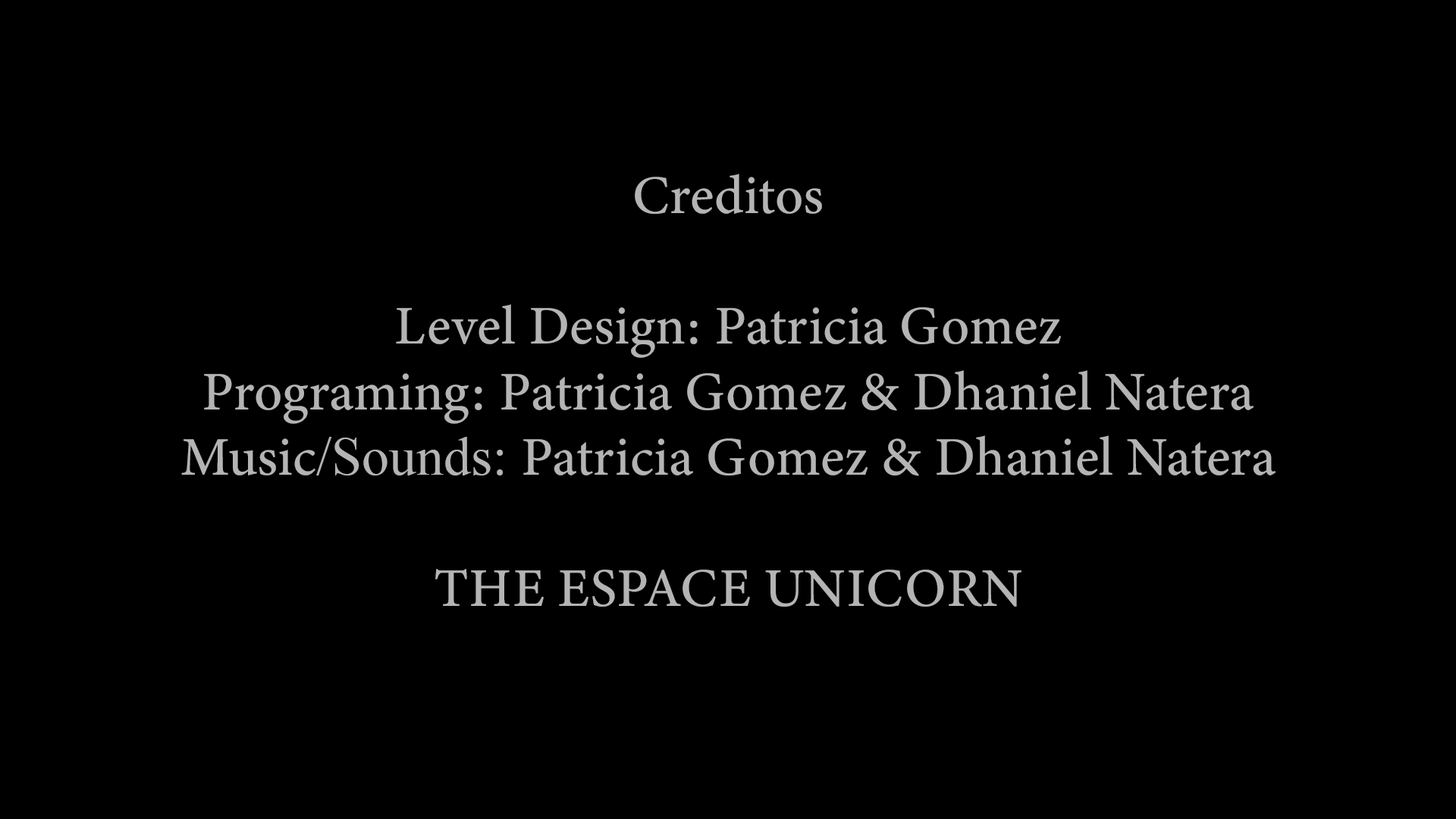
<style>
.page{position:relative;width:1456px;height:819px;background:#000000}
.page>*{position:absolute;margin:0}
.t1{font:54.6px "MinionConceptRoman-Medium";color:#b4b4b4}
.t2{font:54.6px "TimesNewRomanPSMT";color:#b4b4b4}
</style>
<div class="page">
<p class="t1" style="left:181px;top:174px;width:1094px;height:433px;text-align:center">Creditos<br><br>Level Design: Patricia Gomez<br>Programing: Patricia Gomez &amp; Dhaniel Natera<br>Music<span class="t2">/Sounds: </span>Patricia Gomez &amp; Dhaniel Natera<br><br>THE ESPACE UNICORN</p>
</div>
